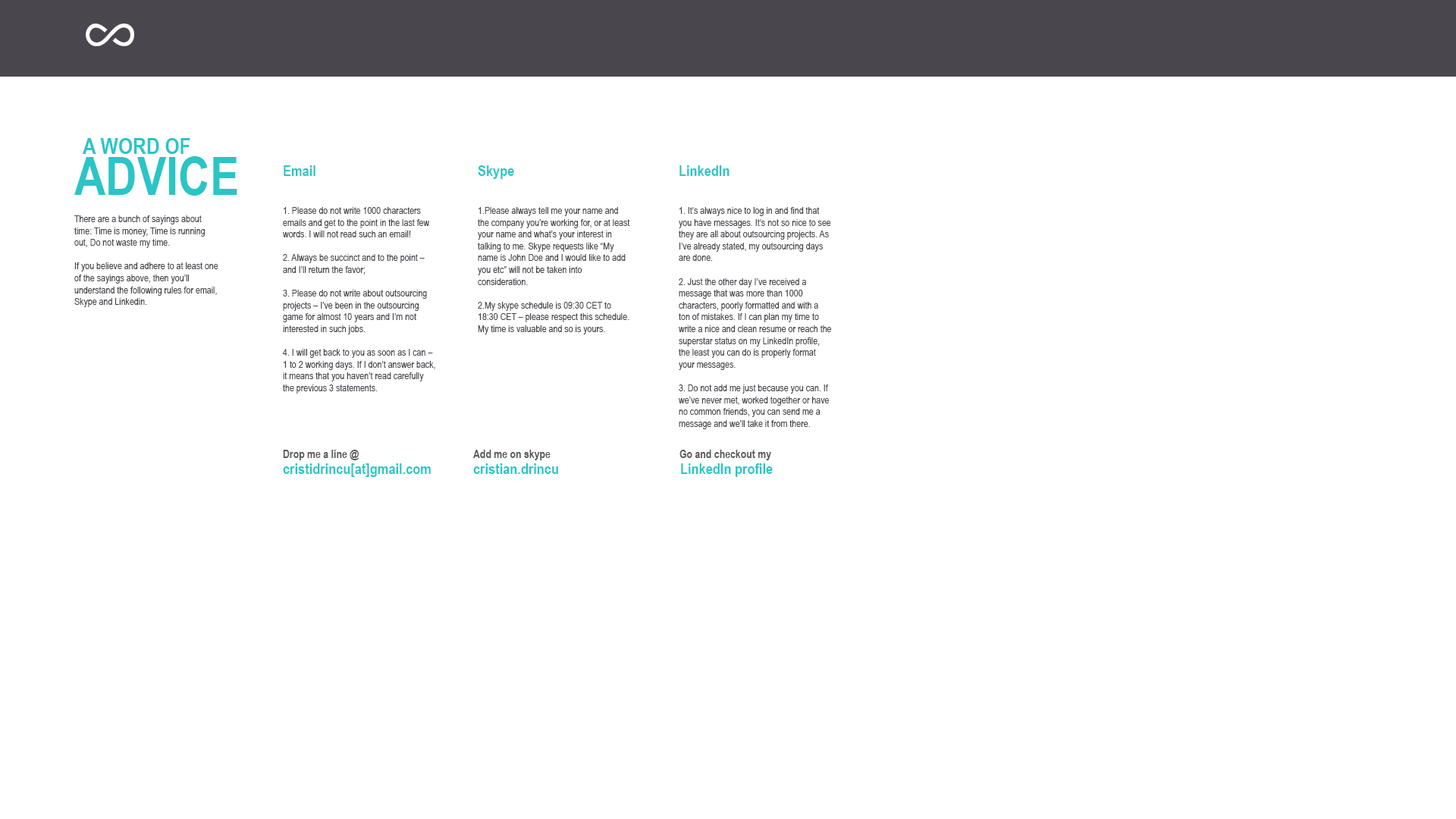
<style>
.page{position:relative;width:1456px;height:819px;background:#ffffff}
.page>*{position:absolute;margin:0}
.t1{font:22.7px "ArialNarrow-Bold";color:#2ac5c6}
.t2{font:53.1px "ArialNarrow-Bold";color:#2ac5c6}
.t3{font:15.2px "ArialNarrow-Bold";color:#2ac5c6}
.t4{font:9.9px "ArialNarrow";color:#48474d}
.t5{font:11.4px "ArialNarrow-Bold";color:#5b5b5b}
</style>
<div class="page">
<p class="t1" style="left:83px;top:138px;width:107px;height:16px">A WORD OF</p>
<p class="t2" style="left:74px;top:156px;width:163px;height:40px">ADVICE</p>
<p class="t3" style="left:284px;top:165px;width:31px;height:11px">Email</p>
<p class="t3" style="left:478px;top:165px;width:36px;height:14px">Skype</p>
<p class="t3" style="left:679px;top:165px;width:51px;height:11px">LinkedIn</p>
<p class="t4" style="left:283px;top:207px;width:152px;height:187px">1. Please do not write 1000 characters emails and get to the point in the last few words. I will not read such an email!<br><br>2. Always be succinct and to the point – and I’ll return the favor;<br><br>3. Please do not write about outsourcing projects – I’ve been in the outsourcing game for almost 10 years and I’m not interested in such jobs.<br> <br>4. I will get back to you as soon as I can – 1 to 2 working days. If I don’t answer back, it means that you haven’t read carefully the previous 3 statements.</p>
<p class="t4" style="left:478px;top:207px;width:152px;height:127px">1.Please always tell me your name and the company you’re working for, or at least your name and what’s your interest in talking to me. Skype requests like “My name is John Doe and I would like to add you etc” will not be taken into consideration.<br><br>2.My skype schedule is 09:30 CET to 18:30 CET – please respect this schedule. My time is valuable and so is yours.</p>
<p class="t4" style="left:679px;top:207px;width:153px;height:222px">1. It’s always nice to log in and find that you have messages. It’s not so nice to see they are all about outsourcing projects. As I’ve already stated, my outsourcing days are done.<br><br>2. Just the other day I’ve received a message that was more than 1000 characters, poorly formatted and with a ton of mistakes. If I can plan my time to write a nice and clean resume or reach the superstar status on my LinkedIn profile, the least you can do is properly format your messages.<br><br>3. Do not add me just because you can. If we’ve never met, worked together or have no common friends, you can send me a message and we’ll take it from there.</p>
<p class="t4" style="left:74px;top:215px;width:144px;height:92px">There are a bunch of sayings about time: Time is money, Time is running out, Do not waste my time. <br><br>If you believe and adhere to at least one of the sayings above, then you’ll understand the following rules for email, Skype and Linkedin.</p>
<p class="t5" style="left:283px;top:450px;width:76px;height:10px">Drop me a line @</p>
<p class="t5" style="left:473px;top:450px;width:78px;height:10px">Add me on skype</p>
<p class="t5" style="left:679px;top:450px;width:92px;height:10px">Go and checkout my</p>
<p class="t3" style="left:283px;top:463px;width:148px;height:14px">cristidrincu[at]gmail.com</p>
<p class="t3" style="left:473px;top:463px;width:85px;height:11px">cristian.drincu</p>
<p class="t3" style="left:681px;top:463px;width:92px;height:14px">LinkedIn profile</p>
</div>
